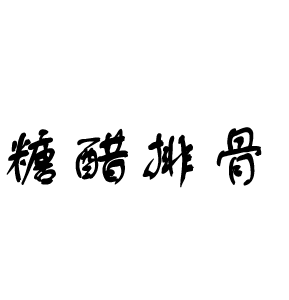
<style>
.page{position:relative;width:289px;height:300px;background:#ffffff}
.page>*{position:absolute;margin:0}
.t1{font:69.1px "FZSTK--GBK1-0";letter-spacing:0.03em;color:#000000;font-weight:bold;scale:0.94 1}
</style>
<div class="page">
<p class="t1" style="left:6px;top:127px;width:256px;height:61px">糖醋排骨</p>
</div>
